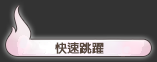
<style>
.page{position:relative;width:157px;height:62px;background:#333333}
.page>*{position:absolute;margin:0}
.t1{font:12px "AdobeFanHeitiStd-Bold";color:#59493f;font-weight:bold}
</style>
<div class="page">
<p class="t1" style="left:55px;top:42px;width:49px;height:12px">快速跳躍</p>
</div>
